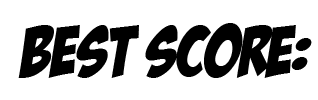
<style>
.page{position:relative;width:318px;height:100px;background:#ffffff}
.page>*{position:absolute;margin:0}
.t1{font:70.6px "BadaBoomBB";color:#000000}
</style>
<div class="page">
<p class="t1" style="left:18px;top:23px;width:294px;height:55px">:Best Score</p>
</div>
